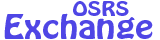
<style>
.page{position:relative;width:160px;height:40px;background:#ffffff}
.page>*{position:absolute;margin:0}
.t1{font:18px "HoboStd";color:#4f46e5;scale:1.19 1}
.t2{font:29.6px "HoboStd";color:#4f46e5;scale:1.19 1}
</style>
<div class="page">
<p class="t1" style="left:73px;top:1px;width:56px;height:15px">OSRS</p>
<p class="t2" style="left:4px;top:13px;width:149px;height:26px">Exchange</p>
</div>
